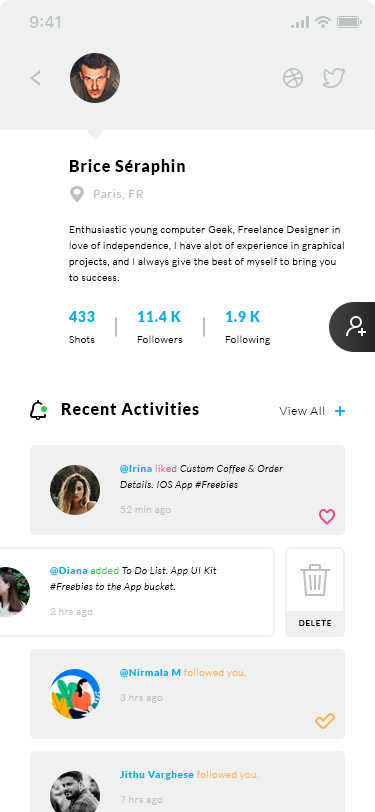
<style>
.page{position:relative;width:375px;height:812px;background:#ffffff}
.page>*{position:absolute;margin:0}
.t1{font:16px "Lato-Black";letter-spacing:0.05em;color:#000000}
.t2{font:12px "Lato-Regular";letter-spacing:0.05em;color:#b9c2bf}
.t3{font:10px/16px "Lato-Light";letter-spacing:0.05em;color:#000000}
.t4{font:10px/21px "Lato-Light";letter-spacing:0.05em;color:#000000}
.t5{font:14px/21px "Lato-Black";letter-spacing:0.05em;color:#00aeef}
.t6{font:12px "Lato-Light";letter-spacing:0.05em;color:#000000}
.t7{font:10px/16px "Lato-LightItalic";letter-spacing:0.05em;color:#000000}
.t8{font:10px/16px "Lato-Black";letter-spacing:0.05em;color:#000000}
.t9{font:10px "Lato-Light";letter-spacing:0.05em;color:#b9c2bf}
.t10{font:10px/16px "Lato-Black";letter-spacing:0.05em;color:#00aeef}
.t11{font:10px/16px "Lato-Light";letter-spacing:0.05em;color:#2ed13d}
.t12{font:8px "Lato-Bold";letter-spacing:0.1em;color:#000000}
.t13{font:10px "Lato-Light";letter-spacing:0.05em;color:#ffaf4e}
.t14{font:10px "Lato-Black";letter-spacing:0.05em;color:#00aeef}
</style>
<div class="page">
<p class="t1" style="left:70px;top:159px;width:115px;height:16px">Brice Séraphin</p>
<p class="t2" style="left:94px;top:189px;width:50px;height:11px">Paris, FR</p>
<p class="t3" style="left:69px;top:225px;width:275px;height:56px">Enthusiastic young computer Geek, Freelance Designer in love of independence, I have alot of experience in graphical projects, and I always give the best of myself to bring you to success.</p>
<p class="t4" style="left:69px;top:311px;width:26px;height:32px"><span class="t5">433<br></span>Shots</p>
<p class="t4" style="left:137px;top:311px;width:46px;height:32px"><span class="t5">11.4 K<br></span>Followers</p>
<p class="t4" style="left:225px;top:311px;width:45px;height:34px"><span class="t5">1.9 K<br></span>Following</p>
<p class="t1" style="left:62px;top:402px;width:137px;height:13px">Recent Activities</p>
<p class="t6" style="left:279px;top:406px;width:46px;height:9px">View All</p>
<p class="t7" style="left:120px;top:464px;width:163px;height:26px"><span class="t8">@Irina</span><span class="t3"> liked </span>Custom Coffee &amp; Order<br>Details. IOS App #Freebies</p>
<p class="t9" style="left:120px;top:506px;width:51px;height:9px">52 min ago</p>
<p class="t7" style="left:50px;top:566px;width:167px;height:26px"><span class="t10">@Diana </span><span class="t11">added </span>To Do List. App UI Kit<br>#Freebies to the App bucket.</p>
<p class="t9" style="left:50px;top:608px;width:43px;height:9px">2 hrs ago</p>
<p class="t12" style="left:299px;top:620px;width:33px;height:6px">DELETE</p>
<p class="t13" style="left:120px;top:668px;width:126px;height:10px"><span class="t14">@Nirmala M </span>followed you.</p>
<p class="t9" style="left:120px;top:694px;width:43px;height:9px">3 hrs ago</p>
<p class="t14" style="left:120px;top:770px;width:139px;height:10px">Jithu Varghese <span class="t13">followed you.</span></p>
<p class="t9" style="left:120px;top:796px;width:43px;height:9px">7 hrs ago</p>
</div>
